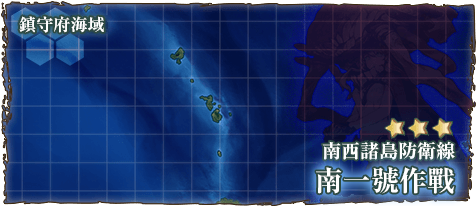
<style>
.page{position:relative;width:476px;height:206px}
.page>*{position:absolute;margin:0}
.t1{font:17px "RyuminPr6N-ExBold";color:#ffffff}
.t2{font:19px "RyuminPro-ExBold";color:#ffffff}
.t3{font:28px "RyuminPr6N-ExBold";color:#ffffff}
</style>
<div class="page">
<p class="t1" style="left:19px;top:16px;width:85px;height:17px">鎮守府海域</p>
<p class="t2" style="left:322px;top:141px;width:133px;height:19px">南西諸島防衛線</p>
<p class="t3" style="left:316px;top:167px;width:139px;height:27px">南一號作戰</p>
</div>
